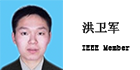
<style>
.page{position:relative;width:140px;height:70px;background:#ffffff}
.page>*{position:absolute;margin:0}
.t1{font:8.3px "SimSun";color:#090909;font-weight:bold}
.t2{font:12.5px "SimSun";color:#090909;font-weight:bold}
</style>
<div class="page">
<p class="t1" style="left:82px;top:21px;width:48px;height:30px"><span class="t2">洪卫军<br></span>IEEE Member</p>
</div>
